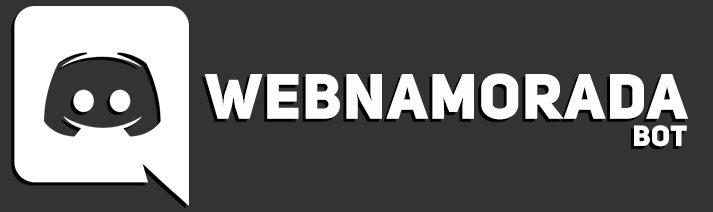
<style>
.page{position:relative;width:713px;height:212px;background:#333333}
.page>*{position:absolute;margin:0}
.t1{font:62.7px "UniSansHeavyCAPS";letter-spacing:0.025em;color:#fffefe}
.t2{font:28.5px "UniSansHeavyCAPS";letter-spacing:0.025em;color:#fffefe}
</style>
<div class="page">
<p class="t1" style="left:204px;top:73px;width:484px;height:47px">WEBNAMORADA</p>
<p class="t2" style="left:634px;top:125px;width:53px;height:22px">BOT</p>
</div>
